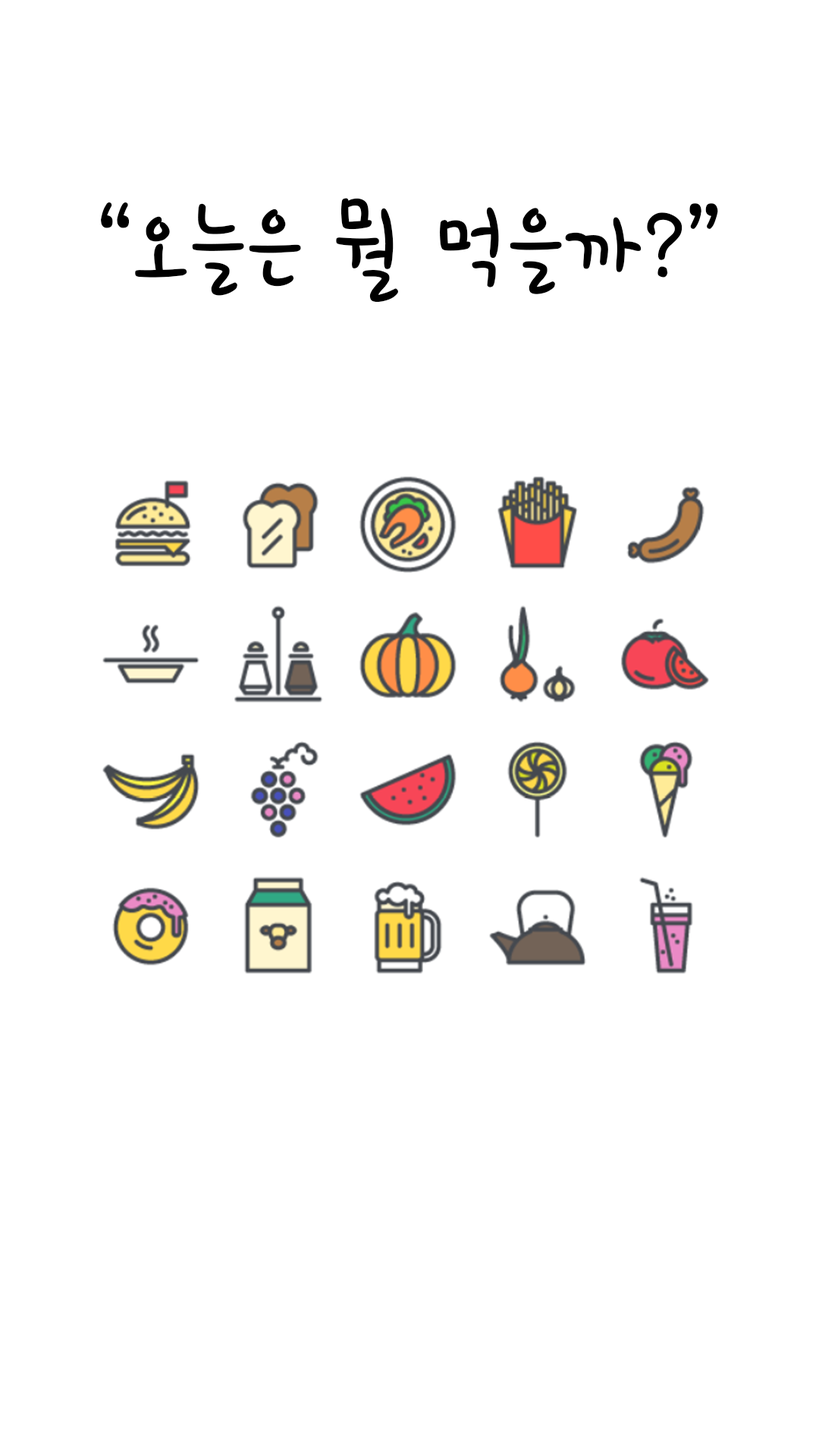
<style>
.page{position:relative;width:819px;height:1456px;background:#ffffff}
.page>*{position:absolute;margin:0}
.t1{font:113.7px "HoonWcatR";color:#000000}
</style>
<div class="page">
<p class="t1" style="left:101px;top:198px;width:617px;height:105px">“오늘은 뭘 먹을까?”</p>
</div>
